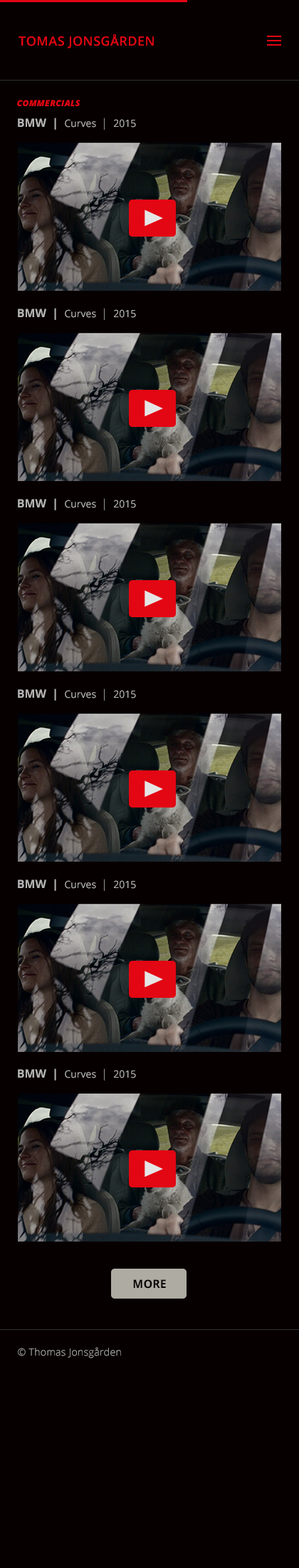
<style>
.page{position:relative;width:299px;height:1568px;background:#070000}
.page>*{position:absolute;margin:0}
.t1{font:12.8px/53.5px "OpenSans-Semibold";letter-spacing:0.025em;color:#e30613}
.t2{font:17.8px/53.5px "OpenSans";letter-spacing:0.025em;color:#e30613}
.t3{font:8.6px "OpenSans-ExtraboldItalic";letter-spacing:0.025em;color:#e30613}
.t4{font:11.4px "OpenSans-Bold";color:#b5b5b5;font-variant:small-caps}
.t5{font:12.8px "OpenSans-ExtraboldItalic";letter-spacing:0.025em;color:#911827}
.t6{font:10px "OpenSans";color:#b5b5b5;font-variant:small-caps}
.t7{font:10px "OpenSans";color:#b5b5b5}
.t8{font:11.4px "OpenSans-Light";color:#b5b5b5}
.t9{font:11.4px "OpenSans-Bold";color:#070000;font-variant:small-caps}
.t10{font:10px "OpenSans-Light";letter-spacing:0.025em;color:#bfbfbf}
</style>
<div class="page">
<p class="t1" style="left:19px;top:34px;width:135px;height:14px">TOMAS JONSGÅRDEN<br><span class="t2"><br><br>SGÅRDEN</span></p>
<p class="t3" style="left:17px;top:100px;width:64px;height:6px">COMMERCIALS</p>
<p class="t4" style="left:18px;top:118px;width:118px;height:12px"><span class="t5"><br></span>BMW  |  <span class="t6">C</span><span class="t7">urves  </span><span class="t8">|  </span><span class="t7">2015</span></p>
<p class="t4" style="left:18px;top:308px;width:118px;height:12px"><span class="t5"><br></span>BMW  |  <span class="t6">C</span><span class="t7">urves  </span><span class="t8">|  </span><span class="t7">2015</span></p>
<p class="t4" style="left:18px;top:498px;width:118px;height:12px"><span class="t5"><br></span>BMW  |  <span class="t6">C</span><span class="t7">urves  </span><span class="t8">|  </span><span class="t7">2015</span></p>
<p class="t4" style="left:18px;top:688px;width:118px;height:13px"><span class="t5"><br></span>BMW  |  <span class="t6">C</span><span class="t7">urves  </span><span class="t8">|  </span><span class="t7">2015</span></p>
<p class="t4" style="left:18px;top:879px;width:118px;height:12px"><span class="t5"><br></span>BMW  |  <span class="t6">C</span><span class="t7">urves  </span><span class="t8">|  </span><span class="t7">2015</span></p>
<p class="t4" style="left:18px;top:1068px;width:118px;height:12px"><span class="t5"><br></span>BMW  |  <span class="t6">C</span><span class="t7">urves  </span><span class="t8">|  </span><span class="t7">2015</span></p>
<p class="t9" style="left:133px;top:1279px;width:33px;height:10px"><span class="t5"><br></span>MORE</p>
<p class="t10" style="left:18px;top:1347px;width:103px;height:11px">© Thomas Jonsgården</p>
</div>
